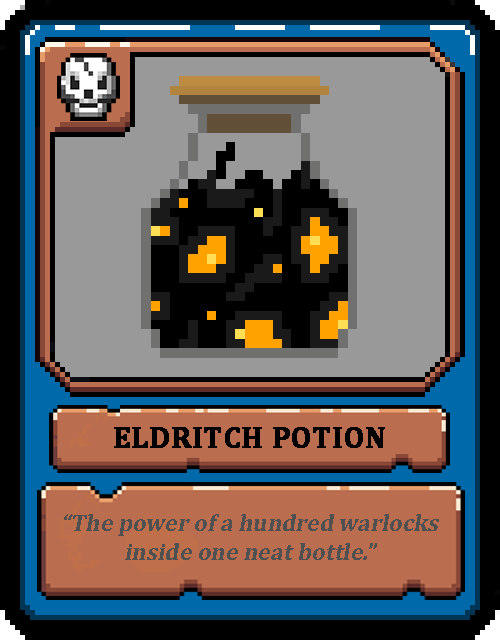
<style>
.page{position:relative;width:500px;height:640px;background:#000000}
.page>*{position:absolute;margin:0}
.t1{font:30px "Cambria-Bold";color:#000000;text-transform:uppercase;font-weight:bold}
.t2{font:24px "Cambria-Bold";color:#505050;font-style:italic}
</style>
<div class="page">
<p class="t1" style="left:114px;top:427px;width:271px;height:21px">Eldritch potion</p>
<p class="t2" style="left:64px;top:514px;width:375px;height:46px;text-align:center">“The power of a hundred warlocks inside one neat bottle.”</p>
</div>
